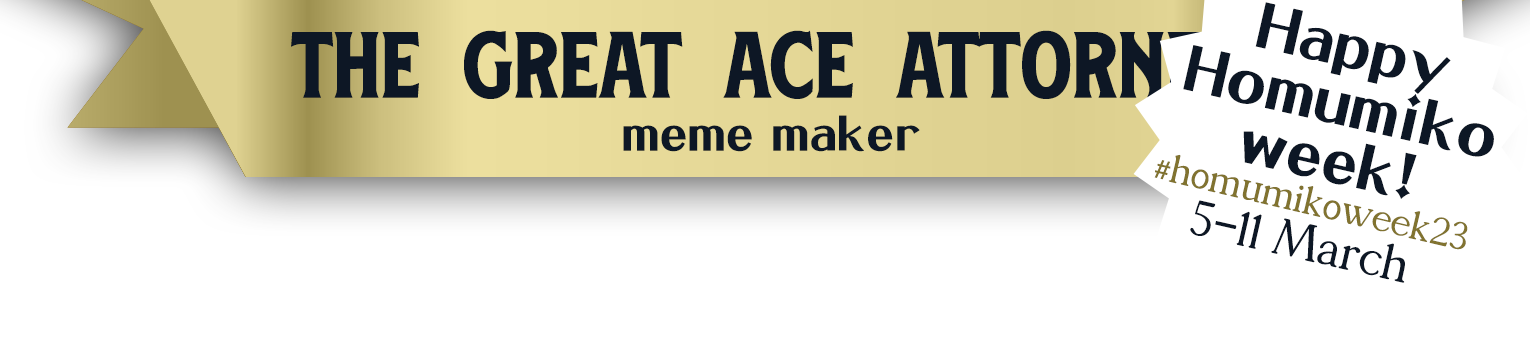
<style>
.page{position:relative;width:1530px;height:342px;background:#ffffff}
.page>*{position:absolute;margin:0}
.t1{font:67.5px "DFLangManXue-W9-WINP-BF";color:#0d1725}
.t2{font:131.1px "BlackfordRegular";color:#0d1725}
.t3{font:52.4px "DFLangManXue-W9-WINP-BF";color:#0d1725}
.t4{font:42.2px "Toplar";color:#817330}
.t5{font:53.3px "Toplar";color:#0d1725}
</style>
<div class="page">
<p class="t1" style="left:1183px;top:2px;width:311px;height:197px;rotate:13deg">Happy Homumiko week!</p>
<p class="t2" style="left:291px;top:30px;width:962px;height:69px">the great ace attorney</p>
<p class="t3" style="left:623px;top:115px;width:297px;height:37px">meme maker</p>
<p class="t4" style="left:1154px;top:154px;width:314px;height:96px;rotate:13deg">#homumikoweek23</p>
<p class="t5" style="left:1190px;top:200px;width:215px;height:83px;rotate:13deg">5-11 March</p>
</div>
